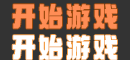
<style>
.page{position:relative;width:130px;height:60px;background:#333333}
.page>*{position:absolute;margin:0}
.t1{font:25.4px "zihun081hao-micaijijiehao_shangyongxushouquan_";letter-spacing:0.075em;color:#ff8d55}
.t2{font:25.4px "zihun081hao-micaijijiehao_shangyongxushouquan_";letter-spacing:0.075em;color:#ffffff}
</style>
<div class="page">
<p class="t1" style="left:12px;top:4px;width:106px;height:25px">开始游戏</p>
<p class="t2" style="left:12px;top:35px;width:106px;height:25px">开始游戏</p>
</div>
